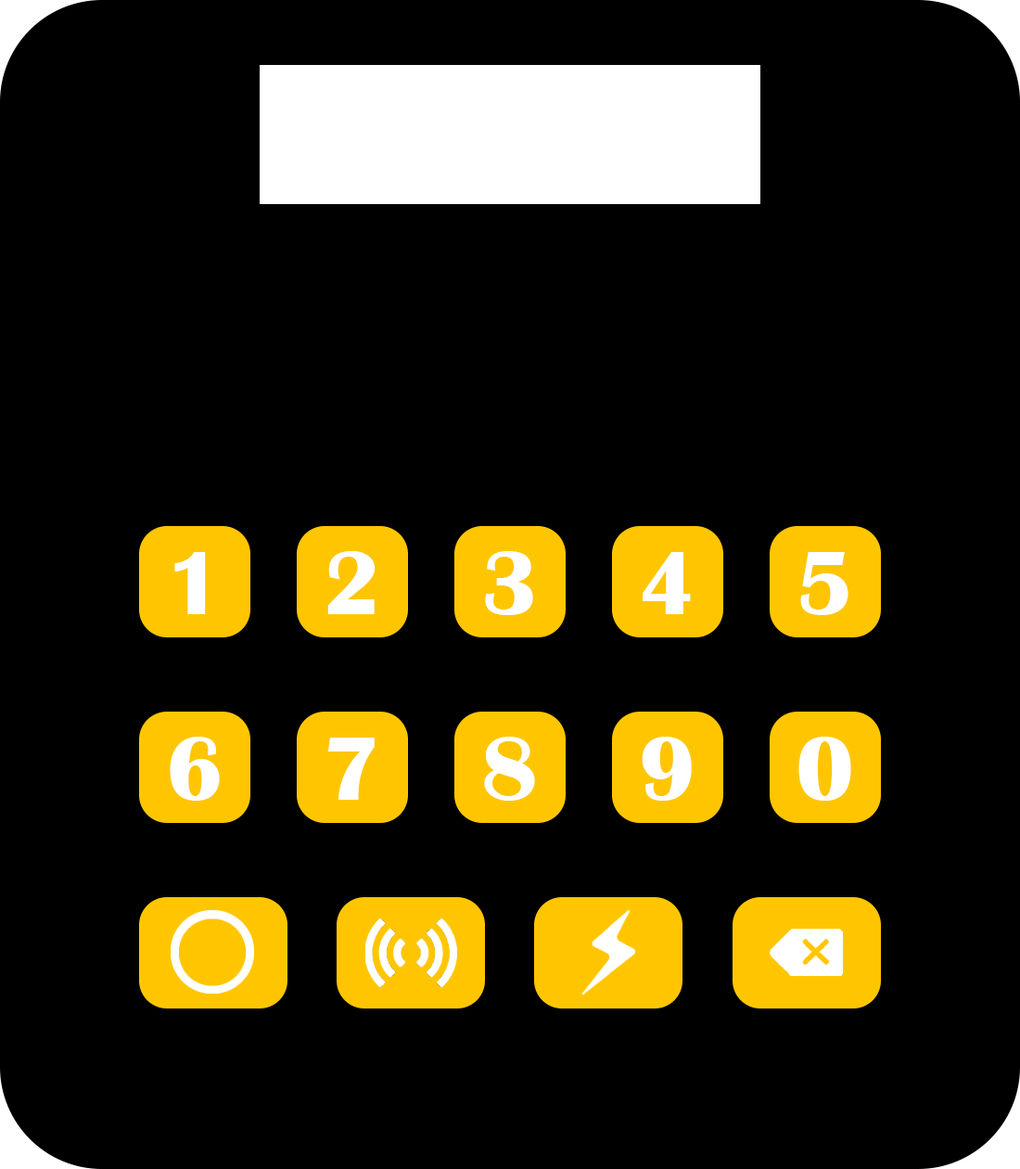
<style>
.page{position:relative;width:1020px;height:1169px;background:#000000}
.page>*{position:absolute;margin:0}
.t1{font:92.8px "BritannicBold";color:#ffffff}
</style>
<div class="page">
<p class="t1" style="left:174px;top:552px;width:32px;height:62px">1</p>
<p class="t1" style="left:327px;top:551px;width:49px;height:63px">2</p>
<p class="t1" style="left:485px;top:551px;width:48px;height:64px">3</p>
<p class="t1" style="left:643px;top:552px;width:48px;height:62px">4</p>
<p class="t1" style="left:800px;top:552px;width:49px;height:63px">5</p>
<p class="t1" style="left:170px;top:736px;width:50px;height:64px">6</p>
<p class="t1" style="left:327px;top:737px;width:48px;height:63px">7</p>
<p class="t1" style="left:484px;top:736px;width:51px;height:64px">8</p>
<p class="t1" style="left:642px;top:736px;width:50px;height:64px">9</p>
<p class="t1" style="left:799px;top:736px;width:52px;height:64px">0</p>
</div>
